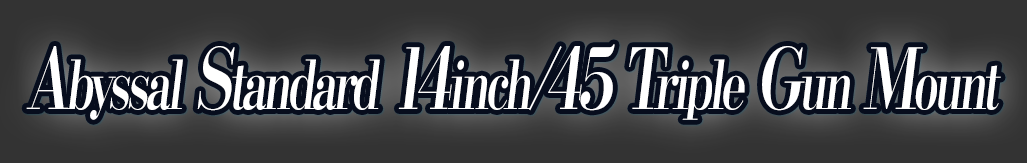
<style>
.page{position:relative;width:1027px;height:163px;background:#333333}
.page>*{position:absolute;margin:0}
.t1{font:67.2px "KochoStd-Heavy";letter-spacing:-0.08em;color:#ffffff;font-style:italic;scale:0.68 1}
.t2{font:84px "KochoStd-Heavy";letter-spacing:-0.08em;color:#ffffff;font-style:italic;scale:0.68 1}
</style>
<div class="page">
<p class="t1" style="left:26px;top:44px;width:975px;height:76px"><span class="t2">A</span>byssal<span class="t2"> S</span>tandard<span class="t2"> 14</span>inch<span class="t2">/45 T</span>riple<span class="t2"> G</span>un<span class="t2"> M</span>ount</p>
</div>
